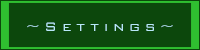
<style>
.page{position:relative;width:200px;height:50px;background:#0c470c}
.page>*{position:absolute;margin:0}
.t1{font:16.7px "BankGothicBT-Light";letter-spacing:0.28em;color:#b8e7f8}
</style>
<div class="page">
<p class="t1" style="left:27px;top:22px;width:146px;height:9px">~Settings~</p>
</div>
